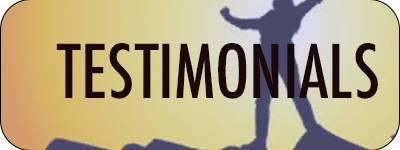
<style>
.page{position:relative;width:400px;height:150px}
.page>*{position:absolute;margin:0}
.t1{font:72px "Futura-CondensedMedium";color:#1b0808}
</style>
<div class="page">
<p class="t1" style="left:56px;top:43px;width:322px;height:56px">TESTIMONIALS</p>
</div>
